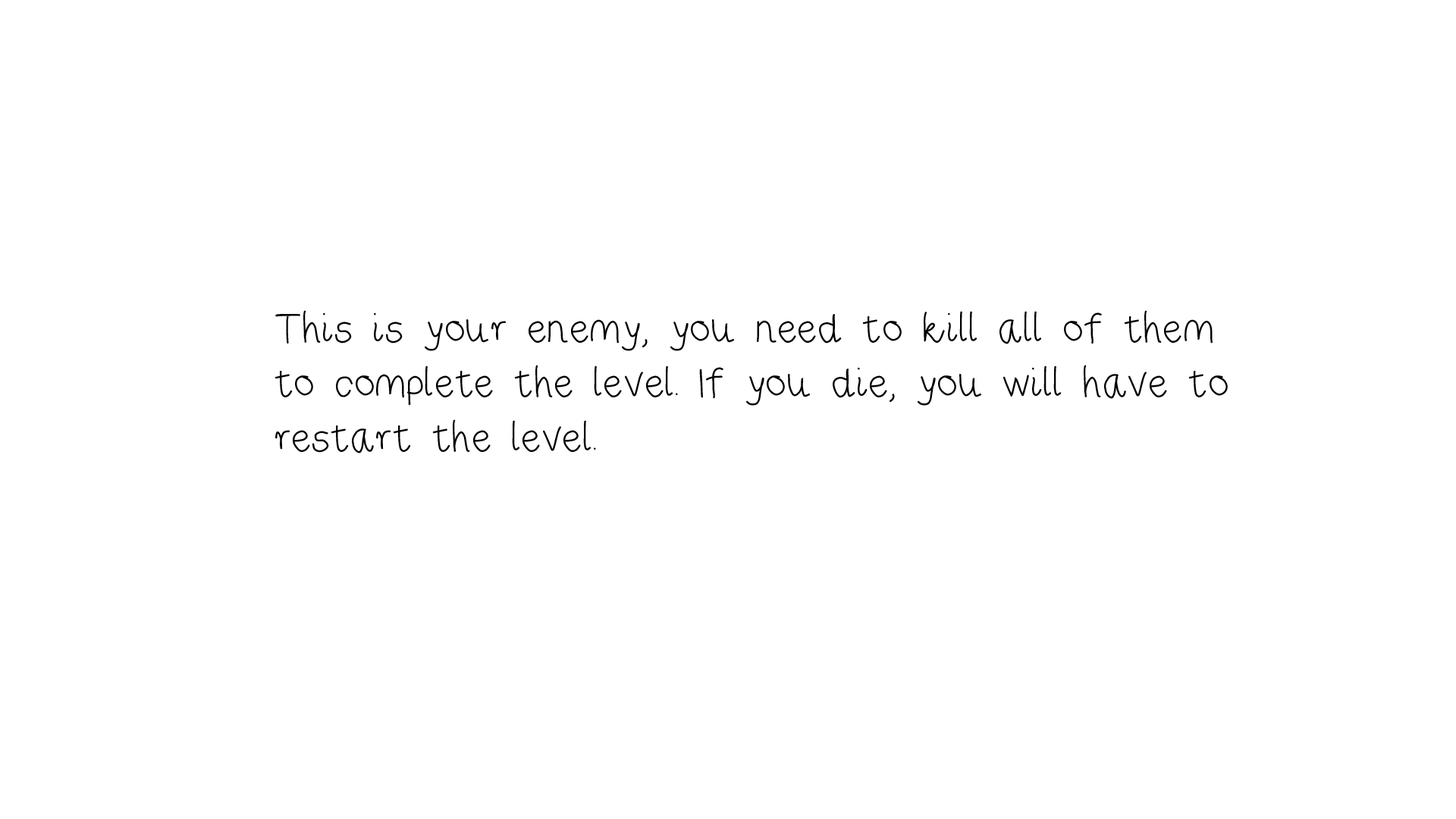
<style>
.page{position:relative;width:1456px;height:819px;background:#ffffff}
.page>*{position:absolute;margin:0}
.t1{font:45.5px "RiseStarHand";color:#000000}
</style>
<div class="page">
<p class="t1" style="left:275px;top:310px;width:953px;height:143px">This is your enemy, you need to kill all of them <br>to complete the level. If you die, you will have to <br>restart the level.</p>
</div>
